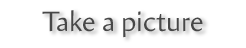
<style>
.page{position:relative;width:246px;height:48px;background:#ffffff}
.page>*{position:absolute;margin:0}
.t1{font:28px "Amira-Roman";color:#474747}
</style>
<div class="page">
<p class="t1" style="left:42px;top:10px;width:161px;height:28px">Take a picture</p>
</div>
